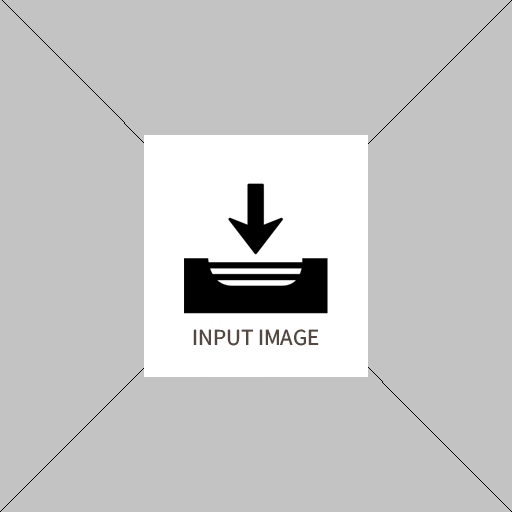
<style>
.page{position:relative;width:512px;height:512px;background:#c3c3c3}
.page>*{position:absolute;margin:0}
.t1{font:23.1px "SourceSansRoman-Regular";color:#544840}
</style>
<div class="page">
<p class="t1" style="left:193px;top:329px;width:126px;height:17px">INPUT IMAGE</p>
</div>
